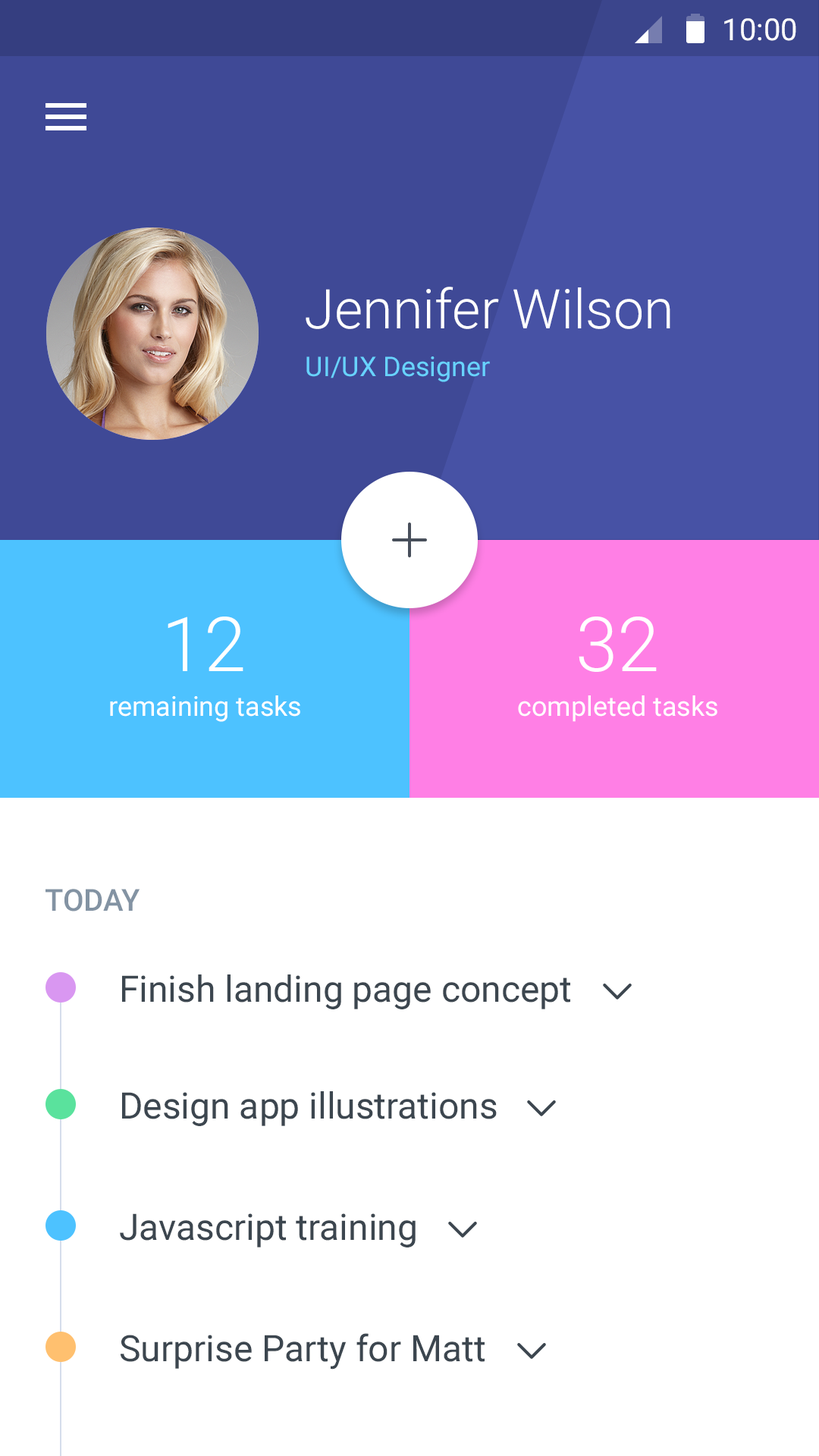
<style>
.page{position:relative;width:819px;height:1456px;background:#ffffff}
.page>*{position:absolute;margin:0}
.t1{font:30.3px "Roboto-Regular";color:#ffffff}
.t2{font:54.6px "Roboto-Light";color:#ffffff}
.t3{font:27.3px "Roboto-Regular";color:#68d3ff}
.t4{font:75.8px "Roboto-Light";color:#ffffff}
.t5{font:27.3px "Roboto-Regular";color:#ffffff}
.t6{font:30.3px "Roboto-Medium";color:#8393a3}
.t7{font:36.4px "Roboto-Regular";color:#3c464f}
</style>
<div class="page">
<p class="t1" style="left:724px;top:18px;width:72px;height:23px">10:00</p>
<p class="t2" style="left:306px;top:287px;width:364px;height:42px">Jennifer Wilson</p>
<p class="t3" style="left:306px;top:356px;width:184px;height:26px">UI/UX Designer</p>
<p class="t4" style="left:168px;top:617px;width:75px;height:54px">12</p>
<p class="t4" style="left:579px;top:617px;width:78px;height:55px">32</p>
<p class="t5" style="left:110px;top:695px;width:190px;height:27px">remaining tasks</p>
<p class="t5" style="left:518px;top:695px;width:199px;height:27px">completed tasks</p>
<p class="t6" style="left:45px;top:889px;width:95px;height:23px">TODAY</p>
<p class="t7" style="left:122px;top:974px;width:448px;height:35px">Finish landing page concept</p>
<p class="t7" style="left:122px;top:1091px;width:375px;height:35px">Design app illustrations</p>
<p class="t7" style="left:120px;top:1213px;width:296px;height:34px">Javascript training</p>
<p class="t7" style="left:121px;top:1333px;width:364px;height:37px">Surprise Party for Matt</p>
</div>
